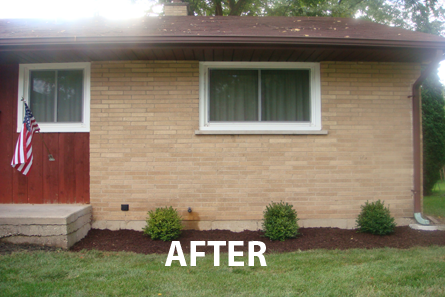
<style>
.page{position:relative;width:445px;height:297px}
.page>*{position:absolute;margin:0}
.t1{font:36px "MyriadPro-Bold";color:#ffffff}
</style>
<div class="page">
<p class="t1" style="left:164px;top:241px;width:103px;height:25px">AFTER</p>
</div>
